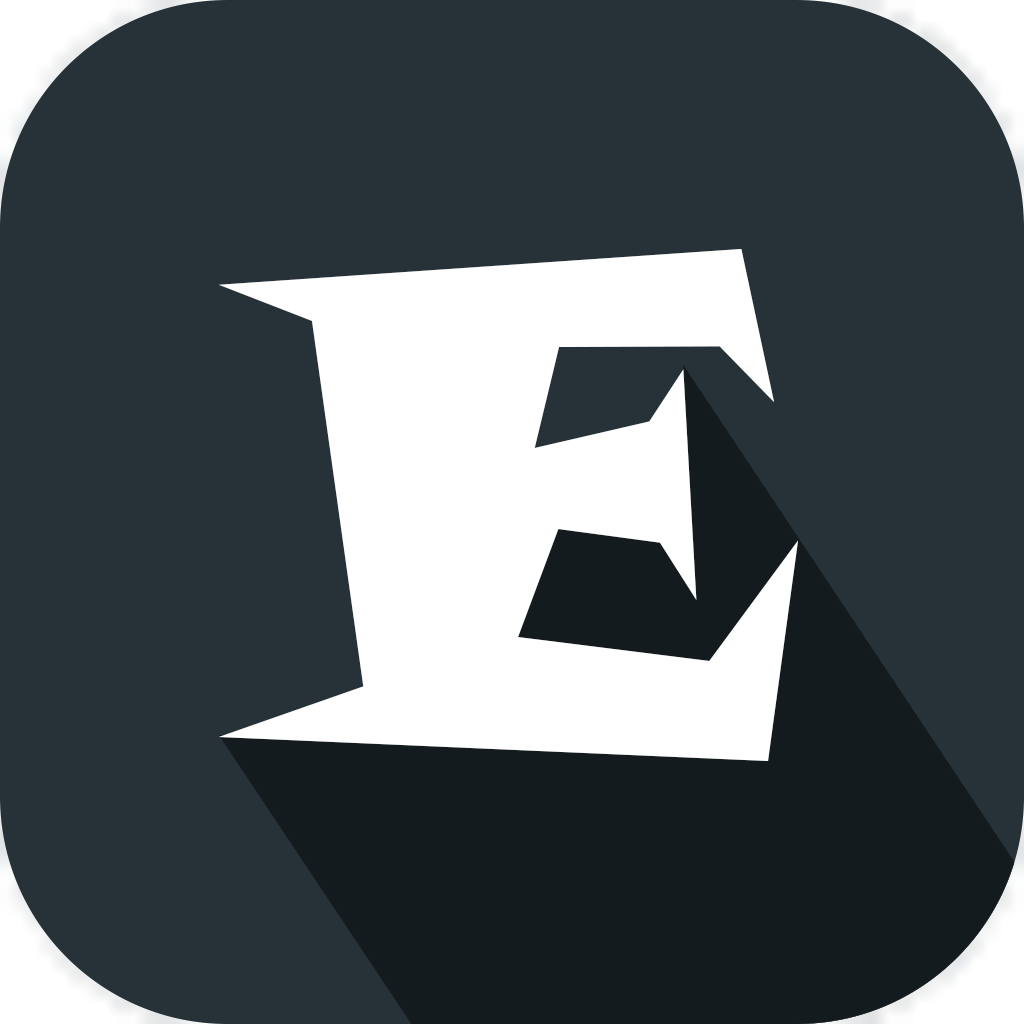
<style>
.page{position:relative;width:1024px;height:1024px;background:#263238}
.page>*{position:absolute;margin:0}
.t1{font:682.7px "SnapITC-Regular";color:#ffffff}
</style>
<div class="page">
<p class="t1" style="left:219px;top:249px;width:579px;height:512px">E</p>
</div>
